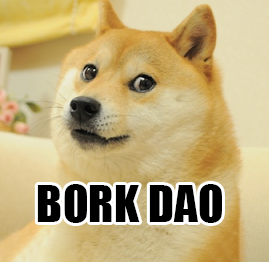
<style>
.page{position:relative;width:269px;height:262px}
.page>*{position:absolute;margin:0}
.t1{font:47.3px "Impact";color:#000000}
</style>
<div class="page">
<p class="t1" style="left:37px;top:184px;width:185px;height:39px">BORK DAO</p>
</div>
